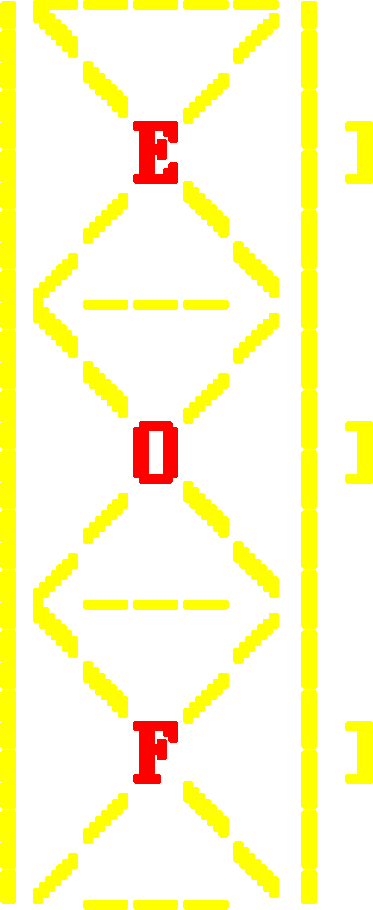
<style>
.page{position:relative;width:373px;height:910px;background:#ffffff}
.page>*{position:absolute;margin:0}
.t1{font:120px/60px "ClassicConsole";color:#ffff00;font-weight:bold}
.t2{font:120px/60px "ClassicConsole";color:#ff0000;font-weight:bold}
</style>
<div class="page">
<p class="t1" style="left:0px;top:0px;width:373px;height:910px">_____<br>|\   /|<br>| \ / |<br>|  <span class="t2">E</span>  |]<br>| / \ |<br>|/___\|<br>|\   /|<br>| \ / |<br>|  <span class="t2">O</span>  |]<br>| / \ |<br>|/___\|<br>|\   /|<br>| \ / |<br>|  <span class="t2">F</span>  |]<br>| / \ |<br>|/___\|</p>
</div>
